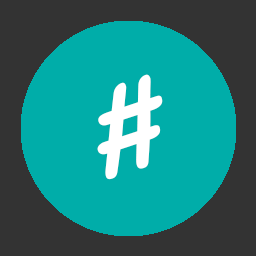
<style>
.page{position:relative;width:256px;height:256px;background:#00ada9}
.page>*{position:absolute;margin:0}
.t1{font:108.3px "Pacifico";color:#ffffff}
</style>
<div class="page">
<p class="t1" style="left:97px;top:74px;width:66px;height:106px;rotate:-18deg">#</p>
</div>
